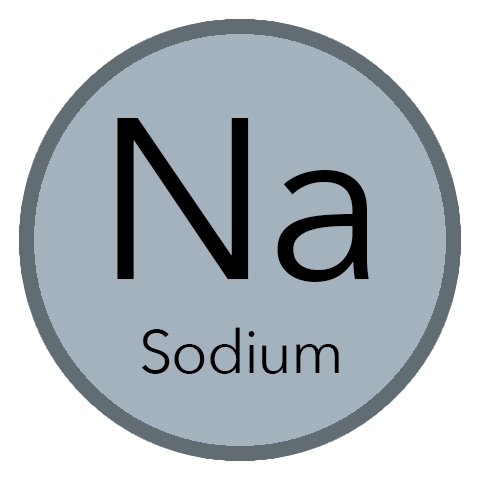
<style>
.page{position:relative;width:480px;height:480px;background:#a4b2bd}
.page>*{position:absolute;margin:0}
.t1{font:227.2px "AvenirNext-Regular";letter-spacing:-0.02em;color:#000000}
.t2{font:60px "AvenirNext-Regular";letter-spacing:-0.02em;color:#000000}
</style>
<div class="page">
<p class="t1" style="left:117px;top:118px;width:252px;height:164px">Na</p>
<p class="t2" style="left:142px;top:327px;width:197px;height:47px">Sodium</p>
</div>
